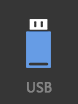
<style>
.page{position:relative;width:78px;height:104px;background:#363636}
.page>*{position:absolute;margin:0}
.t1{font:14px "SegoeUI";color:#848484;font-weight:bold}
</style>
<div class="page">
<p class="t1" style="left:27px;top:82px;width:25px;height:11px">USB</p>
</div>
